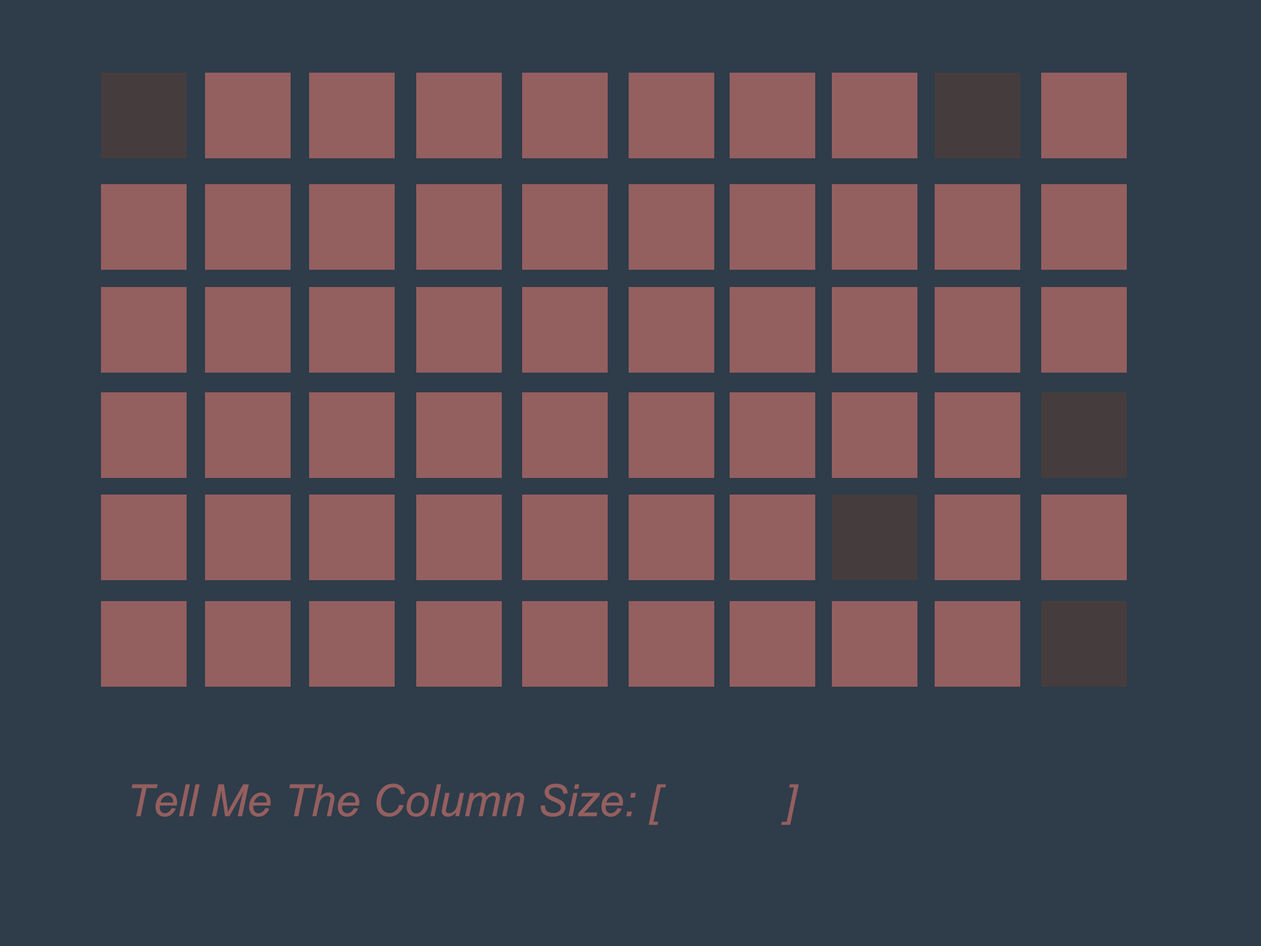
<style>
.page{position:relative;width:1261px;height:946px;background:#2f3c4a}
.page>*{position:absolute;margin:0}
.t1{font:44.3px "Arial-ItalicMT";color:#945f5f}
</style>
<div class="page">
<p class="t1" style="left:132px;top:783px;width:667px;height:42px">Tell Me The Column Size: [          ]</p>
</div>
